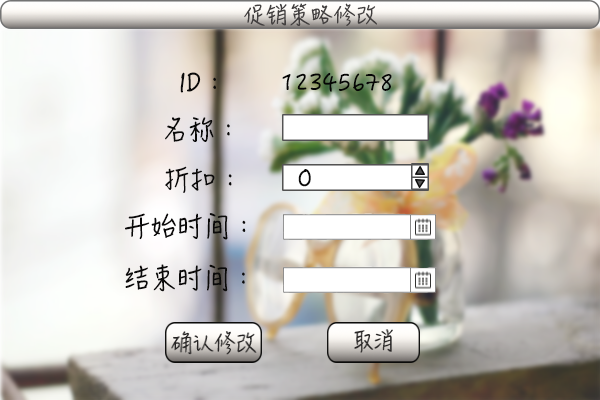
<style>
.page{position:relative;width:600px;height:400px}
.page>*{position:absolute;margin:0}
.t1{font:22px "HanziPenSC-W5";letter-spacing:-0.005em;color:#423f3f;text-transform:uppercase}
.t2{font:26px "HanziPenSC-W5";letter-spacing:-0.005em;color:#0b0a0a;text-transform:uppercase}
.t3{font:24px "HanziPenSC-W5";letter-spacing:-0.005em;color:#050505;text-transform:uppercase}
</style>
<div class="page">
<p class="t1" style="left:244px;top:3px;width:133px;height:23px">促销策略修改</p>
<p class="t2" style="left:180px;top:72px;width:36px;height:21px">ID：</p>
<p class="t3" style="left:282px;top:72px;width:110px;height:20px">12345678</p>
<p class="t2" style="left:165px;top:117px;width:65px;height:25px">名称：</p>
<p class="t2" style="left:165px;top:166px;width:67px;height:27px">折扣：</p>
<p class="t2" style="left:125px;top:213px;width:121px;height:27px">开始时间：</p>
<p class="t2" style="left:125px;top:264px;width:120px;height:28px">结束时间：</p>
</div>
